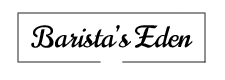
<style>
.page{position:relative;width:225px;height:80px;background:#ffffff}
.page>*{position:absolute;margin:0}
.t1{font:29.3px "Norican-Regular";color:#000000}
</style>
<div class="page">
<p class="t1" style="left:31px;top:25px;width:162px;height:23px">Barista’s Eden</p>
</div>
